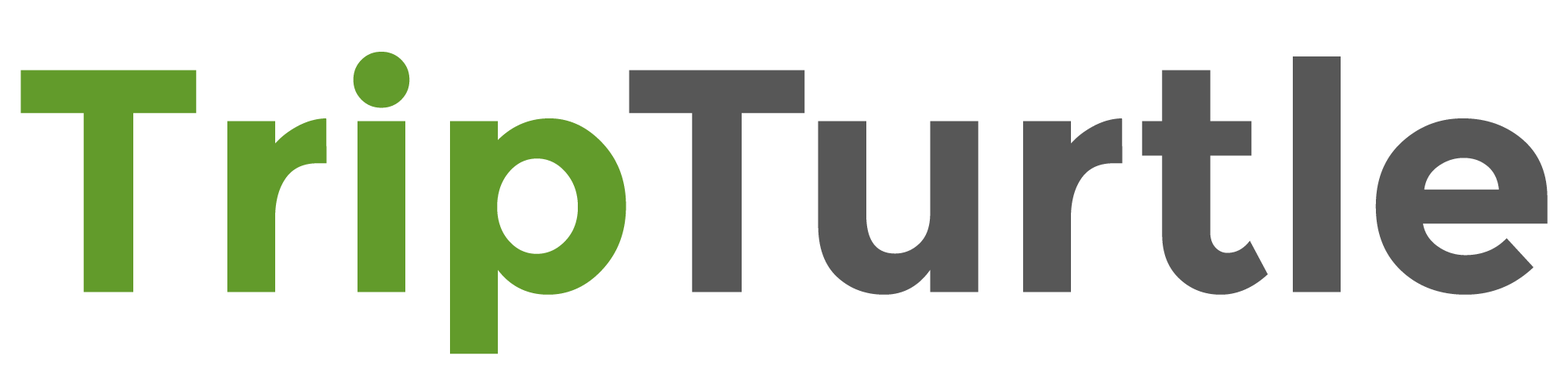
<style>
.page{position:relative;width:1568px;height:392px;background:#ffffff}
.page>*{position:absolute;margin:0}
.t1{font:317.4px "Montserrat-Bold";color:#575757}
.t2{font:317.4px "Montserrat-Bold";color:#629b2b}
</style>
<div class="page">
<p class="t1" style="left:20px;top:52px;width:1528px;height:302px"><span class="t2">Trip</span>Turtle</p>
</div>
